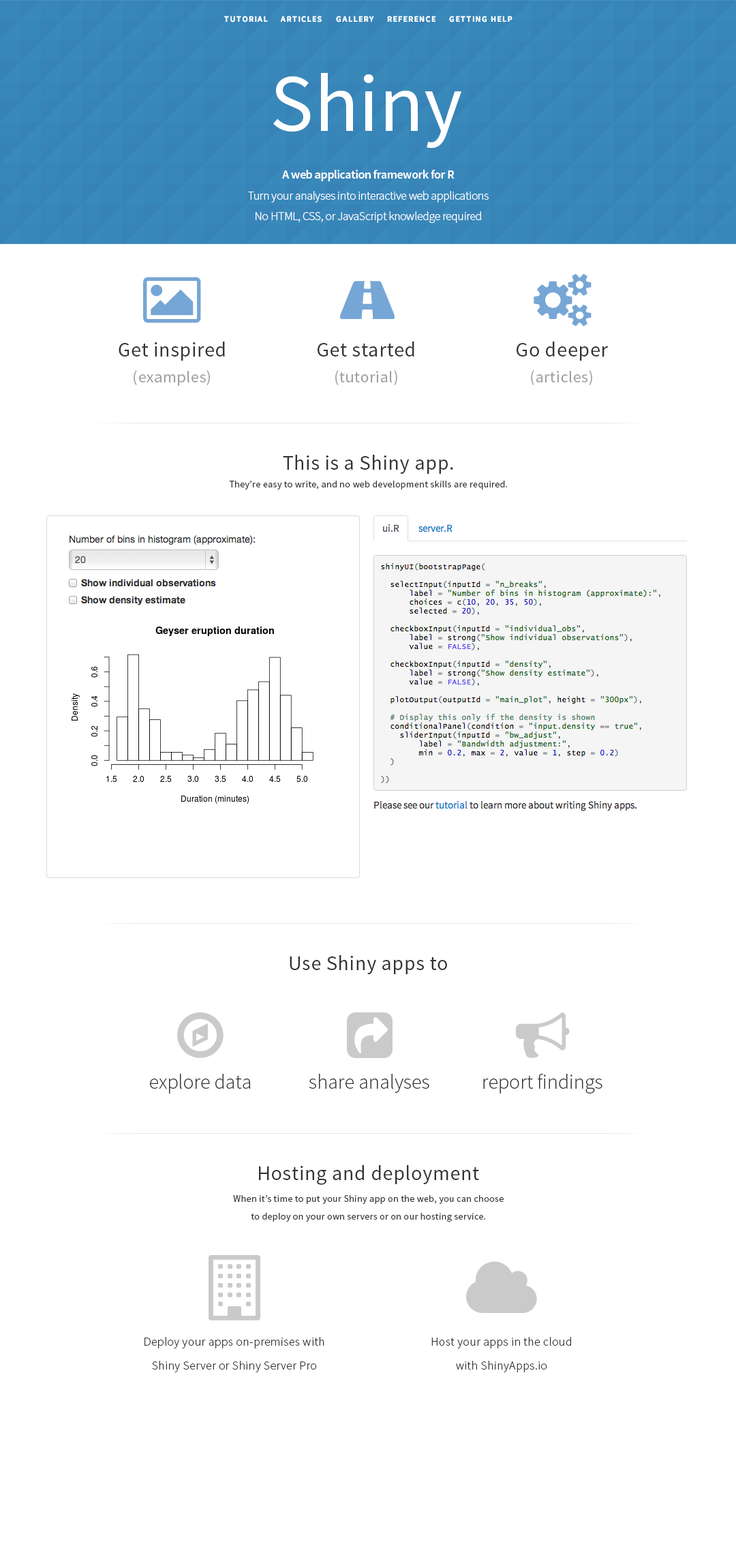
<style>
.page{position:relative;width:736px;height:1568px;background:#ffffff}
.page>*{position:absolute;margin:0}
.t1{font:81.8px "SourceSansPro-Regular";color:#ffffff}
.t2{font:12.3px "SourceSansPro-Light";letter-spacing:-0.025em;color:#ffffff}
.t3{font:12.3px "SourceSansPro-Semibold";letter-spacing:-0.025em;color:#ffffff}
.t4{font:20.5px "SourceSansPro-Regular";color:#333333}
.t5{font:16.4px "MyriadPro-Regular";color:#a1a1a1}
.t6{font:8.2px "MyriadPro-Regular";color:#333333}
.t7{font:9.5px "MyriadPro-Regular";color:#333333}
.t8{font:20.5px "SourceSansPro-Light";color:#333333}
.t9{font:12.3px "SourceSansPro-Light";color:#333333}
</style>
<div class="page">
<p class="t1" style="left:273px;top:73px;width:189px;height:76px">Shiny</p>
<p class="t2" style="left:248px;top:170px;width:241px;height:53px;text-align:center"><span class="t3">A web application framework for R<br></span>Turn your analyses into interactive web applications<br>No HTML, CSS, or JavaScript knowledge required</p>
<p class="t4" style="left:119px;top:342px;width:106px;height:44px;text-align:center">Get inspired<br><span class="t5">(examples)</span></p>
<p class="t4" style="left:318px;top:342px;width:96px;height:43px;text-align:center">Get started<br><span class="t5">(tutorial)</span></p>
<p class="t5" style="left:517px;top:342px;width:91px;height:43px;text-align:center"><span class="t6">Go deeper<br></span>(articles)</p>
<p class="t6" style="left:283px;top:455px;width:170px;height:19px;text-align:center">This is a Shiny app.</p>
<p class="t7" style="left:229px;top:481px;width:278px;height:8px">They’re easy to write, and no web development skills are required.</p>
<p class="t6" style="left:290px;top:955px;width:157px;height:19px;text-align:center">Use Shiny apps to</p>
<p class="t8" style="left:150px;top:1074px;width:100px;height:20px">explore data</p>
<p class="t8" style="left:309px;top:1074px;width:120px;height:19px">share analyses</p>
<p class="t8" style="left:483px;top:1074px;width:120px;height:20px">report findings</p>
<p class="t6" style="left:259px;top:1165px;width:220px;height:20px;text-align:center">Hosting and deployment</p>
<p class="t7" style="left:233px;top:1195px;width:271px;height:27px;text-align:center">When it’s time to put your Shiny app on the web, you can choose<br>to deploy on your own servers or on our hosting service.</p>
<p class="t9" style="left:145px;top:1337px;width:180px;height:35px;text-align:center">Deploy your apps on-premises with<br>Shiny Server or Shiny Server Pro</p>
<p class="t9" style="left:432px;top:1337px;width:139px;height:35px;text-align:center">Host your apps in the cloud<br>with ShinyApps.io</p>
</div>
